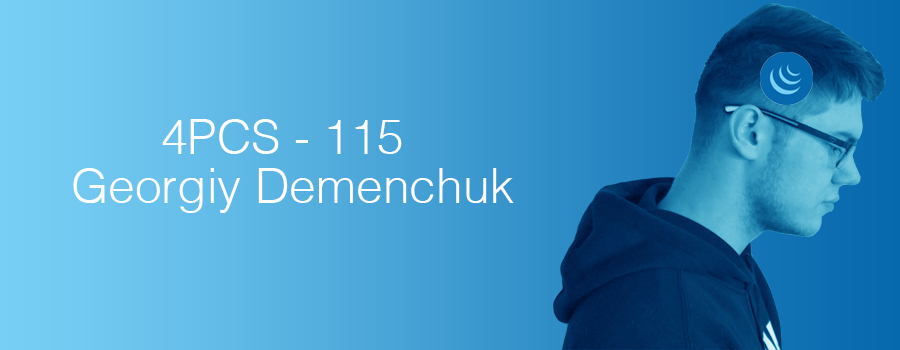
<style>
.page{position:relative;width:900px;height:350px}
.page>*{position:absolute;margin:0}
.t1{font:48px "Helvetica-Light";color:#ffffff}
</style>
<div class="page">
<p class="t1" style="left:162px;top:119px;width:240px;height:35px">4PCS - 115</p>
<p class="t1" style="left:73px;top:168px;width:441px;height:45px">Georgiy Demenchuk</p>
</div>
